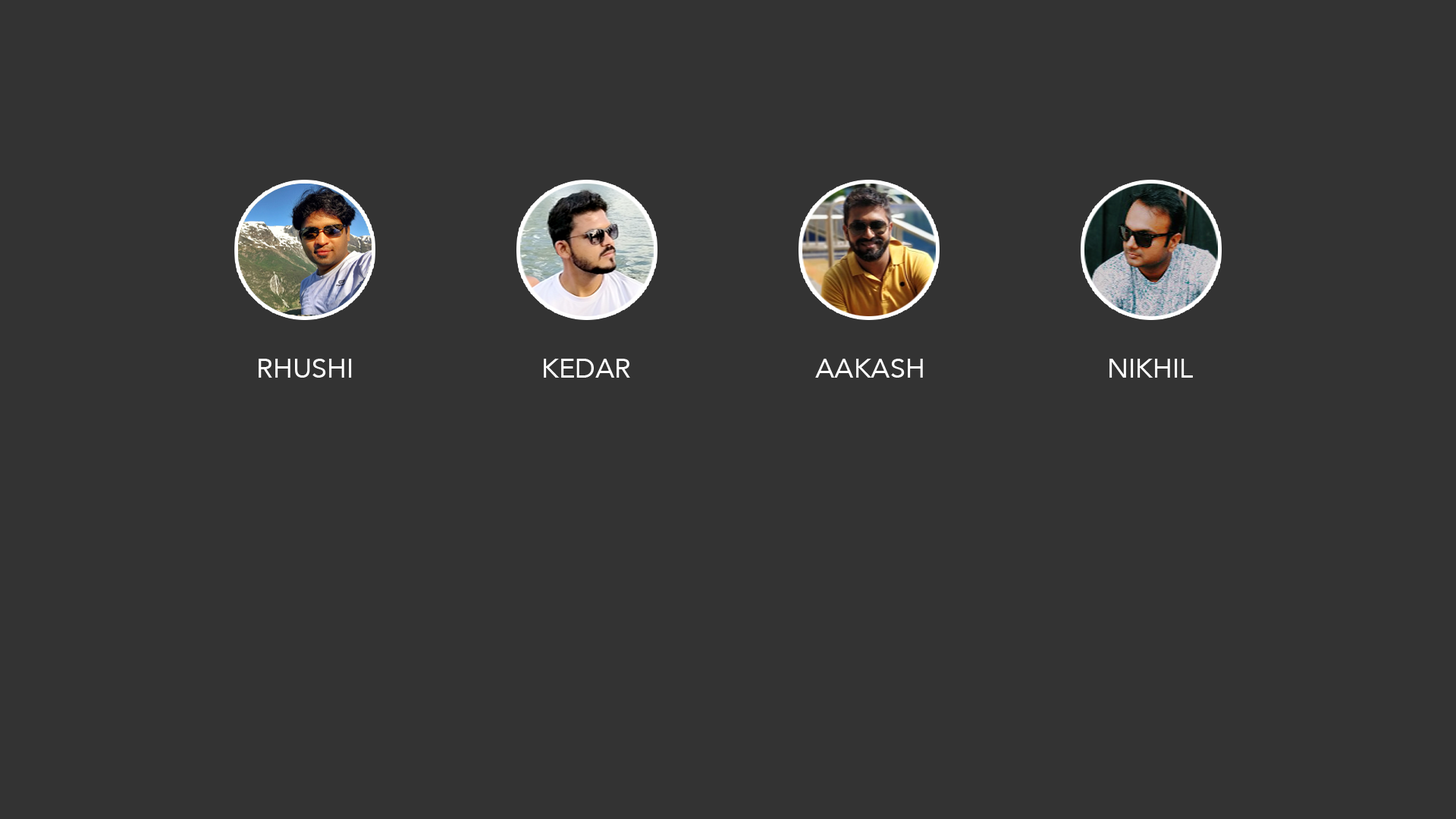
<style>
.page{position:relative;width:1456px;height:819px;background:#333333}
.page>*{position:absolute;margin:0}
.t1{font:27.3px "Avenir-Roman";color:#ffffff}
</style>
<div class="page">
<p class="t1" style="left:259px;top:359px;width:93px;height:19px">RHUSHI</p>
<p class="t1" style="left:544px;top:359px;width:86px;height:19px">KEDAR</p>
<p class="t1" style="left:815px;top:359px;width:108px;height:19px">AAKASH</p>
<p class="t1" style="left:1109px;top:359px;width:84px;height:19px">NIKHIL</p>
</div>
